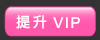
<style>
.page{position:relative;width:100px;height:40px;background:#333333}
.page>*{position:absolute;margin:0}
.t1{font:14px "LinGothic-bold";letter-spacing:0.2em;color:#ffffff;text-transform:uppercase}
.t2{font:15px "ArialMT";letter-spacing:0.1em;color:#ffffff;text-transform:uppercase}
</style>
<div class="page">
<p class="t1" style="left:16px;top:15px;width:31px;height:14px">提升</p>
<p class="t2" style="left:53px;top:17px;width:27px;height:11px">vip</p>
</div>
